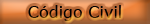
<style>
.page{position:relative;width:150px;height:24px}
.page>*{position:absolute;margin:0}
.t1{font:16px "Verdana";color:#000000}
</style>
<div class="page">
<p class="t1" style="left:28px;top:5px;width:93px;height:16px">Código Civil</p>
</div>
